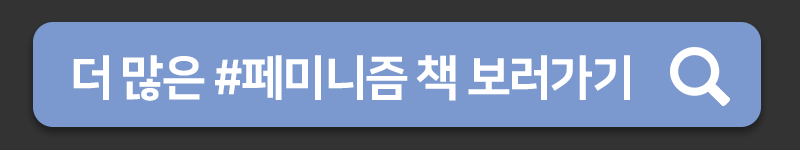
<style>
.page{position:relative;width:800px;height:150px;background:#7b99cf}
.page>*{position:absolute;margin:0}
.t1{font:48px "NanumSquareEB";letter-spacing:-0.05em;color:#ffffff}
</style>
<div class="page">
<p class="t1" style="left:73px;top:55px;width:557px;height:46px">더 많은 #페미니즘 책 보러가기</p>
</div>
